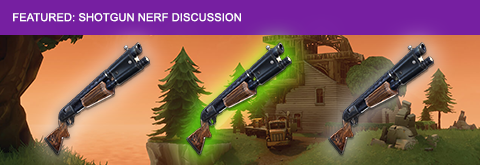
<style>
.page{position:relative;width:480px;height:165px}
.page>*{position:absolute;margin:0}
.t1{font:11px "ArialMT";letter-spacing:0.015em;color:#ffffff}
</style>
<div class="page">
<p class="t1" style="left:13px;top:13px;width:228px;height:9px">FEATURED: SHOTGUN NERF DISCUSSION</p>
</div>
